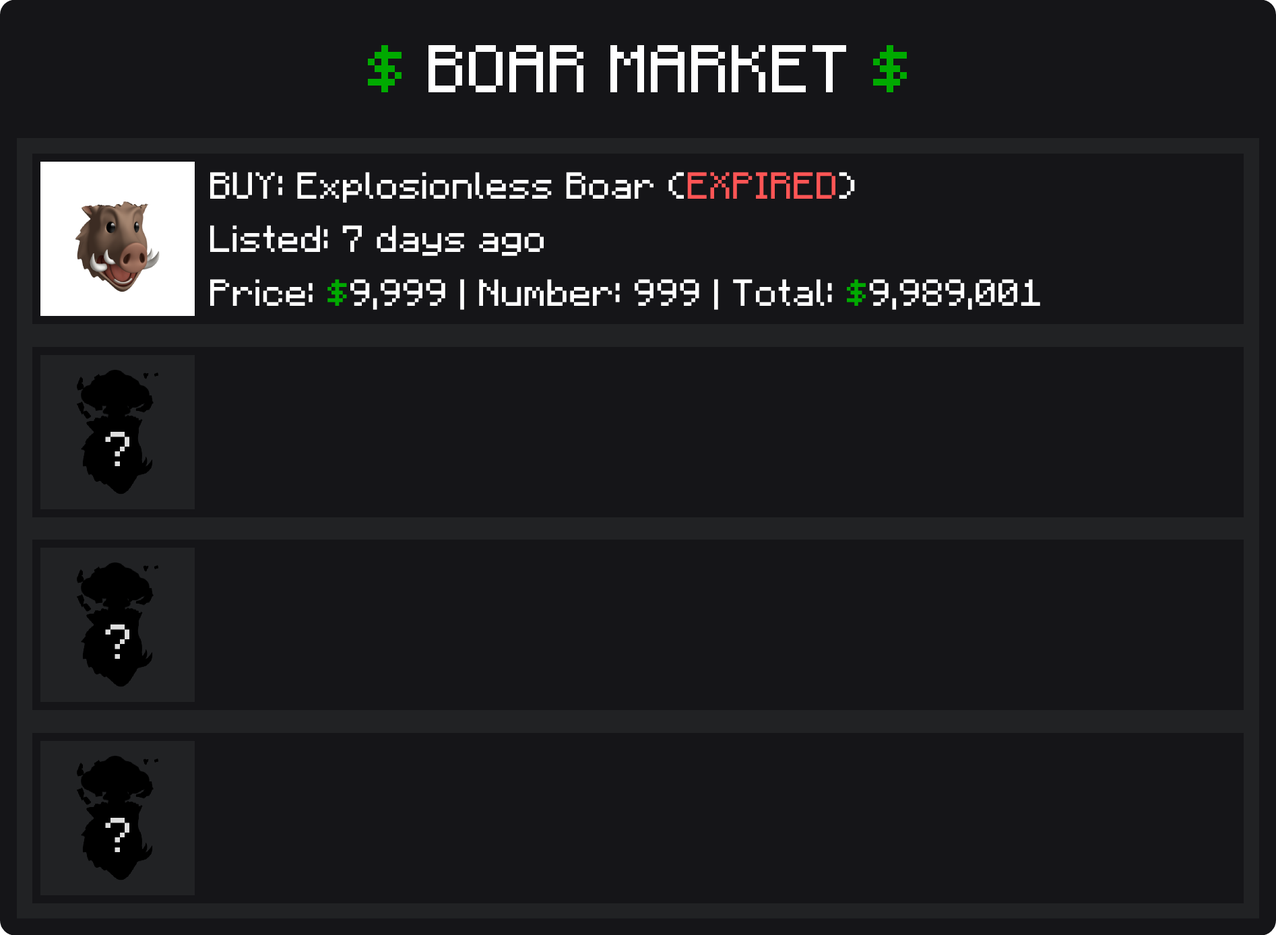
<style>
.page{position:relative;width:1276px;height:935px;background:#151518}
.page>*{position:absolute;margin:0}
.t1{font:53.9px "F77-Minecraft";color:#ffffff}
.t2{font:53.9px "F77-Minecraft";color:#00aa00}
.t3{font:30.3px "F77-Minecraft";color:#ffffff}
.t4{font:30.3px "F77-Minecraft";color:#ff5555}
.t5{font:30.3px "F77-Minecraft";color:#00aa00}
</style>
<div class="page">
<p class="t1" style="left:368px;top:45px;width:539px;height:47px"><span class="t2">$ </span>BOAR MARKET <span class="t2">$</span></p>
<p class="t3" style="left:210px;top:172px;width:645px;height:31px">BUY: Explosionless Boar (<span class="t4">EXPIRED</span>)</p>
<p class="t3" style="left:210px;top:225px;width:334px;height:31px">Listed: 7 days ago</p>
<p class="t3" style="left:210px;top:279px;width:830px;height:31px">Price: <span class="t5">$</span>9,999 | Number: 999 | Total: <span class="t5">$</span>9,989,001</p>
</div>
